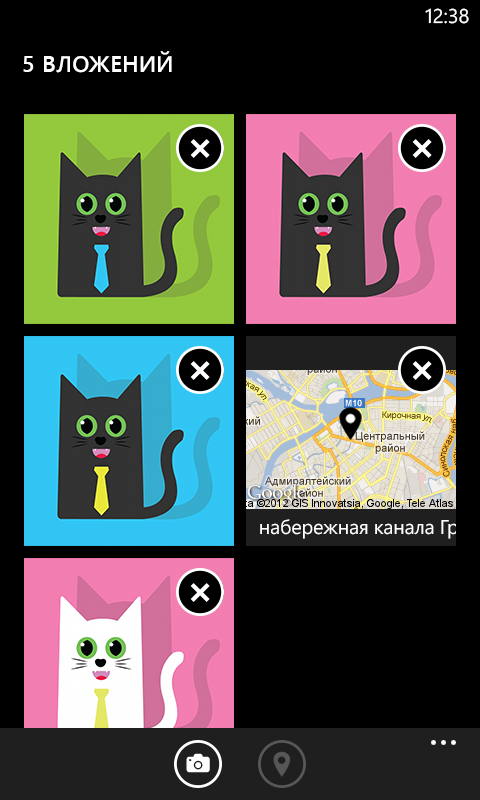
<style>
.page{position:relative;width:480px;height:800px;background:#000000}
.page>*{position:absolute;margin:0}
.t1{font:20px "SegoeWP";color:#ffffff}
.t2{font:22.7px "SegoeWP-Semibold";letter-spacing:0.025em;color:#ffffff;text-transform:uppercase}
</style>
<div class="page">
<p class="t1" style="left:425px;top:8px;width:44px;height:16px">12:38</p>
<p class="t2" style="left:23px;top:51px;width:149px;height:22px">5 Вложений</p>
</div>
